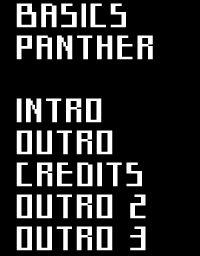
<style>
.page{position:relative;width:200px;height:256px;background:#000000}
.page>*{position:absolute;margin:0}
.t1{font:31px "Starcadia";color:#ffffff;font-weight:bold}
</style>
<div class="page">
<p class="t1" style="left:16px;top:3px;width:110px;height:25px">BASICS</p>
<p class="t1" style="left:16px;top:35px;width:137px;height:25px">PANTHER</p>
<p class="t1" style="left:16px;top:98px;width:86px;height:25px">INTRO</p>
<p class="t1" style="left:16px;top:130px;width:97px;height:25px">OUTRO</p>
<p class="t1" style="left:16px;top:162px;width:126px;height:25px">CREDITS</p>
<p class="t1" style="left:16px;top:194px;width:130px;height:25px">OUTRO 2</p>
<p class="t1" style="left:16px;top:226px;width:130px;height:25px">OUTRO 3</p>
</div>
